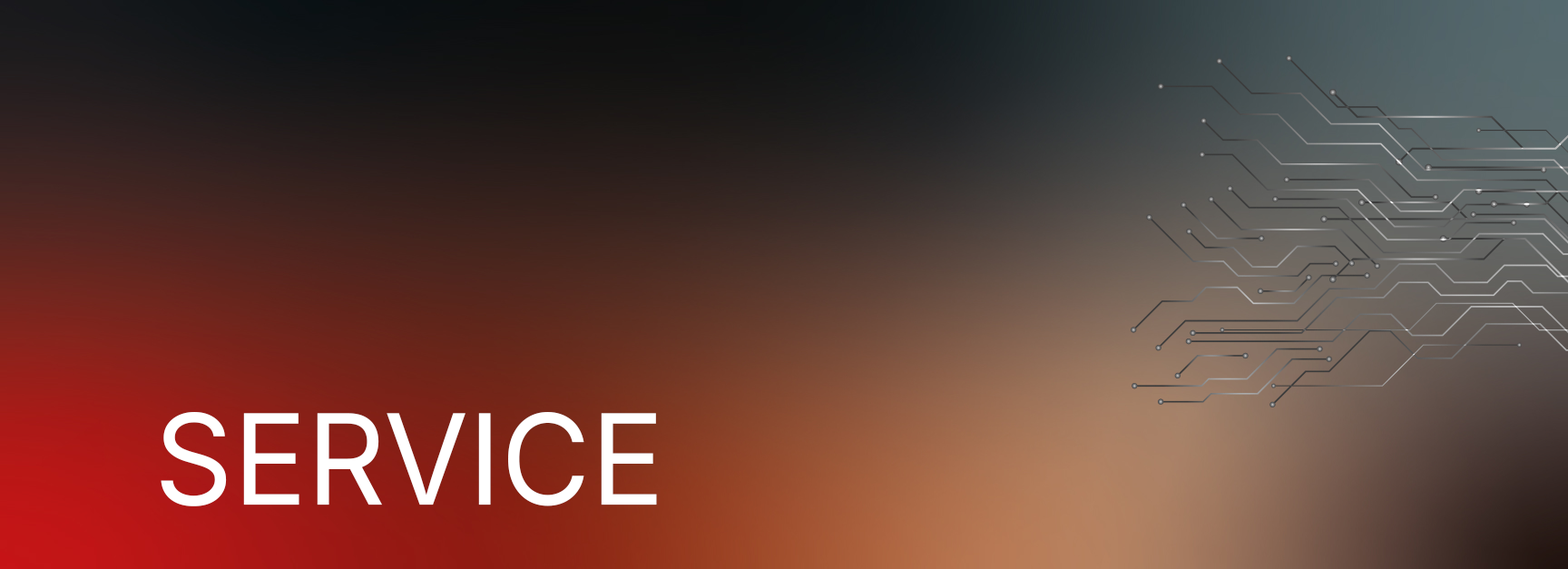
<style>
.page{position:relative;width:1568px;height:569px}
.page>*{position:absolute;margin:0}
.t1{font:125.5px "Inter-Regular";color:#ffffff}
</style>
<div class="page">
<p class="t1" style="left:161px;top:412px;width:496px;height:94px">SERVICE</p>
</div>
